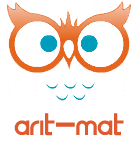
<style>
.page{position:relative;width:136px;height:142px;background:#ffffff}
.page>*{position:absolute;margin:0}
.t1{font:36px "BDP-Birgula";color:#de592d;font-variant:small-caps}
</style>
<div class="page">
<p class="t1" style="left:14px;top:113px;width:110px;height:23px">arit-mat</p>
</div>
